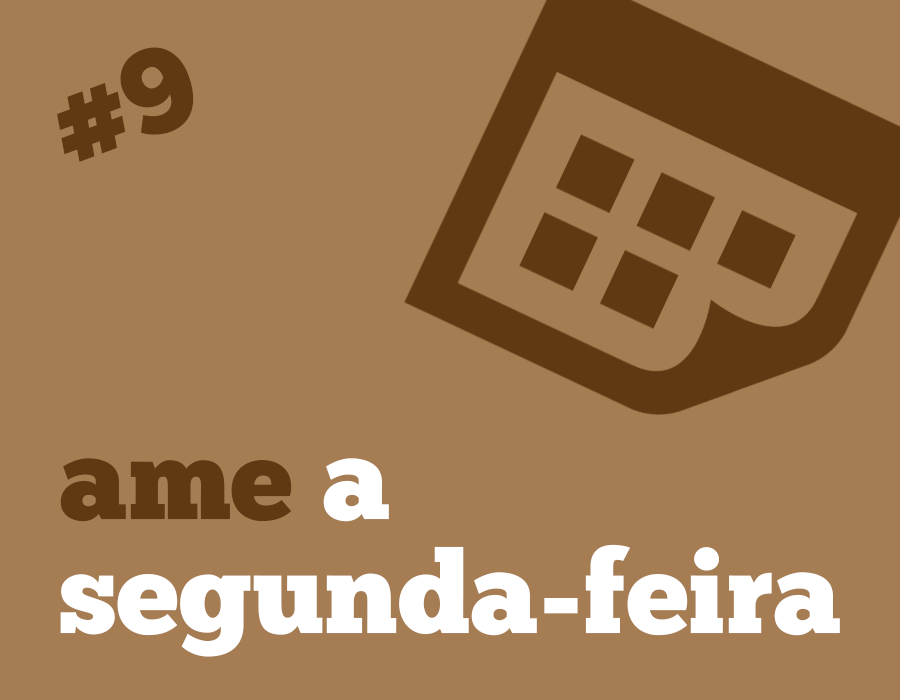
<style>
.page{position:relative;width:900px;height:700px;background:#a67c52}
.page>*{position:absolute;margin:0}
.t1{font:120.7px "ChunkFive-Roman";color:#603913}
.t2{font:114.8px/114.1px "ChunkFive-Roman";color:#ffffff}
.t3{font:114.8px/114.1px "ChunkFive-Roman";color:#603913}
</style>
<div class="page">
<p class="t1" style="left:57px;top:47px;width:137px;height:115px;rotate:-20deg">#9</p>
<p class="t2" style="left:60px;top:458px;width:780px;height:199px"><span class="t3">ame</span> a<br>segunda-feira</p>
</div>
